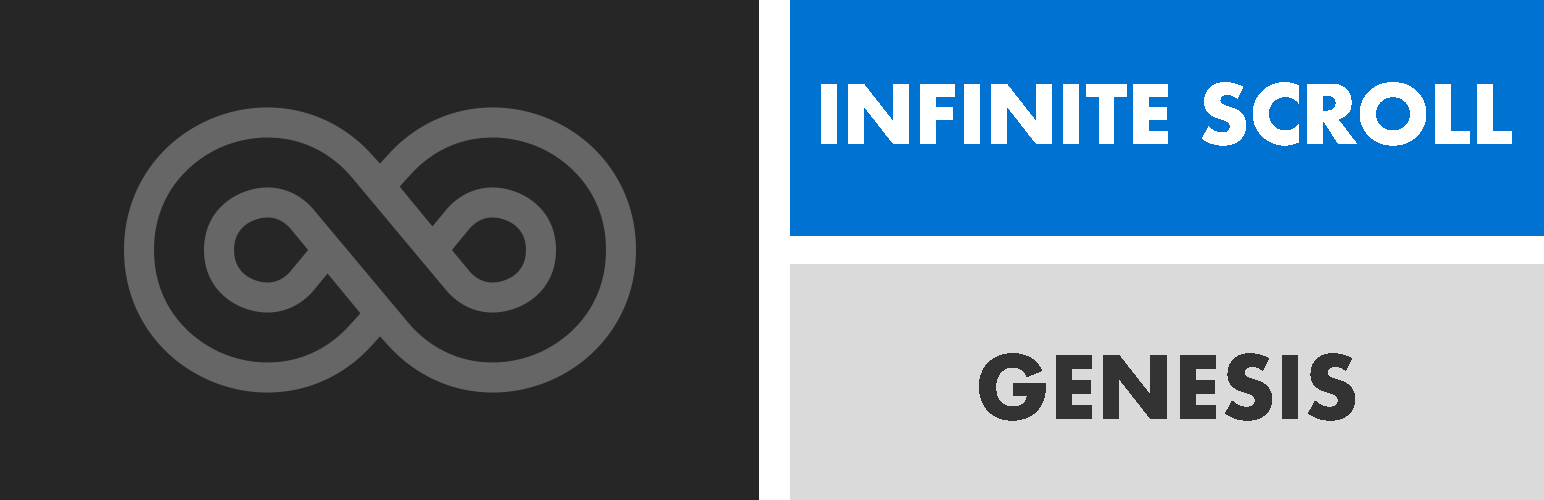
<style>
.page{position:relative;width:1544px;height:500px;background:#262626}
.page>*{position:absolute;margin:0}
.t1{font:80px "Futura-Bold";letter-spacing:-0.01em;color:#ffffff}
.t2{font:85px "Futura-Bold";letter-spacing:-0.01em;color:#333333}
</style>
<div class="page">
<p class="t1" style="left:821px;top:82px;width:691px;height:64px">INFINITE SCROLL</p>
<p class="t2" style="left:979px;top:353px;width:376px;height:68px">GENESIS</p>
</div>
